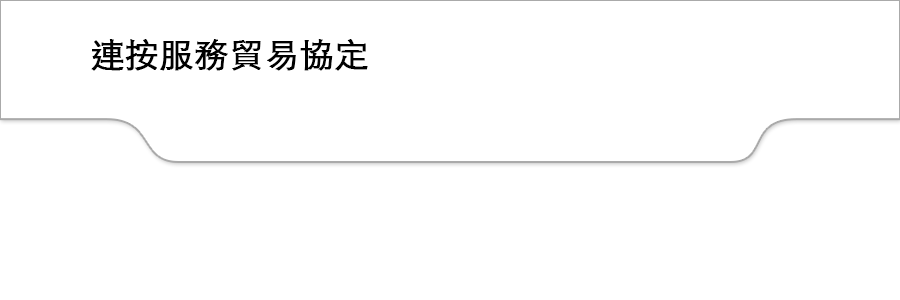
<style>
.page{position:relative;width:900px;height:300px;background:#ffffff}
.page>*{position:absolute;margin:0}
.t1{font:34px "STHeitiTC-Light";color:#010101;font-weight:bold}
</style>
<div class="page">
<p class="t1" style="left:91px;top:39px;width:277px;height:32px">連按服務貿易協定</p>
</div>
